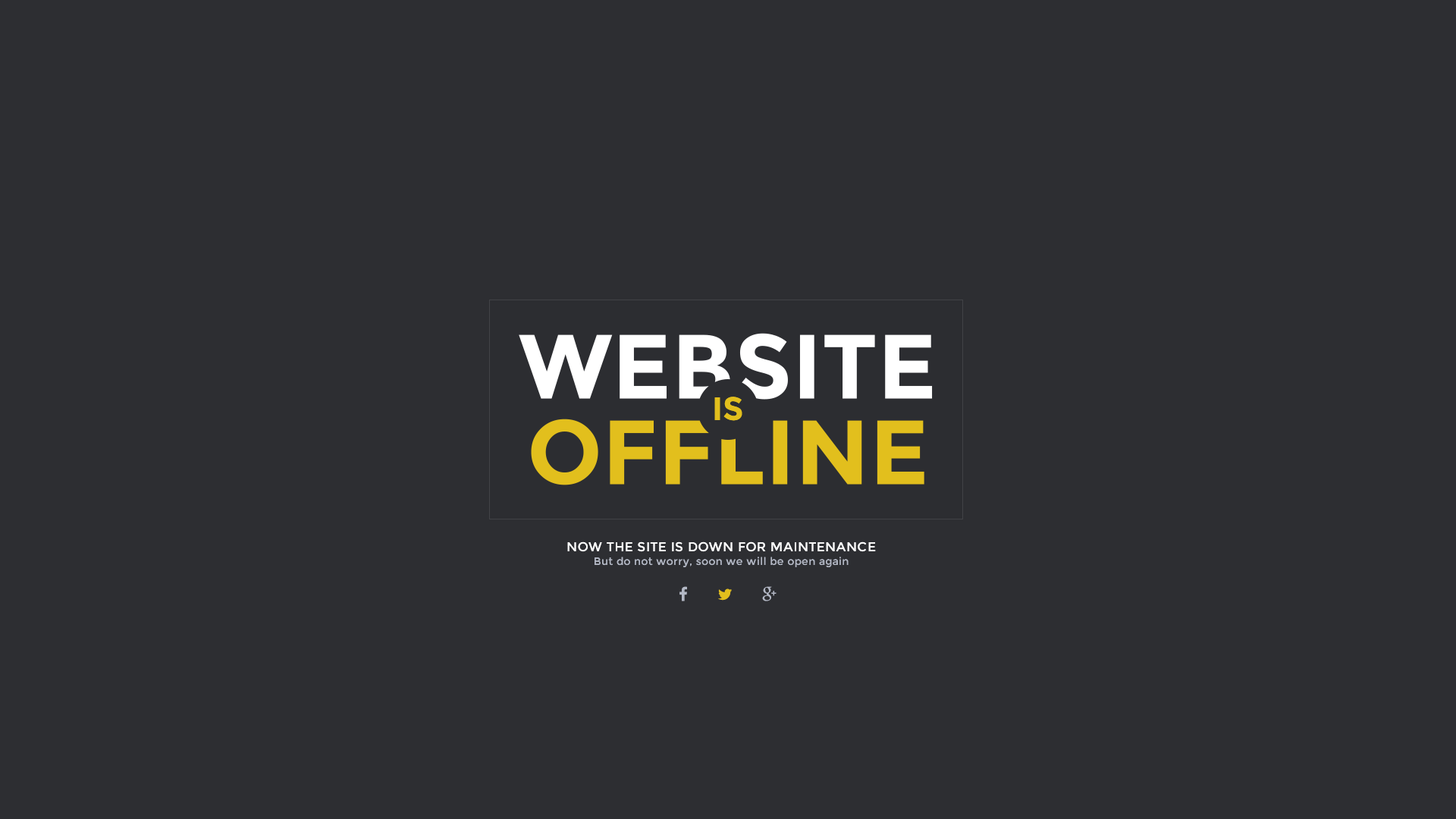
<style>
.page{position:relative;width:1456px;height:819px;background:#2d2e32}
.page>*{position:absolute;margin:0}
.t1{font:32.6px "Montserrat-Bold";color:#e2bf1d;text-transform:uppercase}
.t2{font:12.9px "Montserrat-Regular";letter-spacing:0.025em;color:#ffffff;text-transform:uppercase}
.t3{font:10.6px "Montserrat-Regular";letter-spacing:0.025em;color:#b3b8c5}
</style>
<div class="page">
<p class="t1" style="left:714px;top:397px;width:28px;height:24px">IS</p>
<p class="t2" style="left:567px;top:541px;width:309px;height:11px">Now the site is down for maintenance</p>
<p class="t3" style="left:595px;top:557px;width:254px;height:10px">But do not worry, soon we will be open again</p>
</div>
